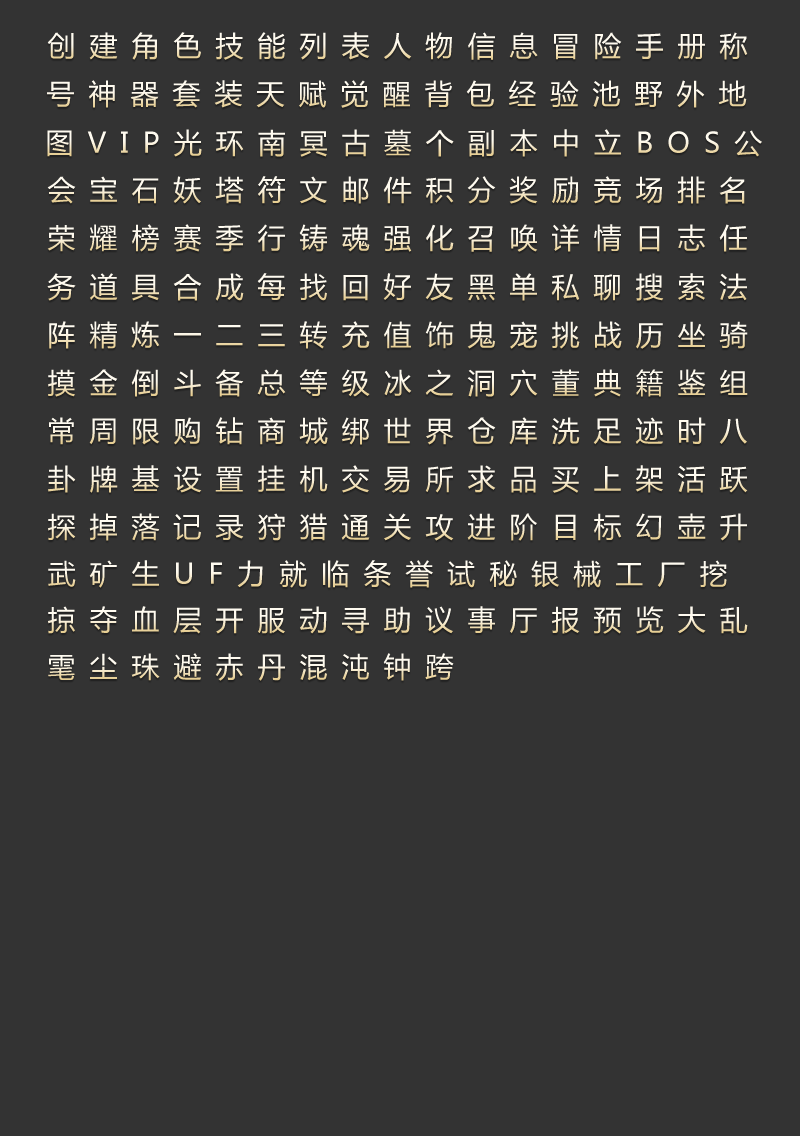
<style>
.page{position:relative;width:800px;height:1136px;background:#333333}
.page>*{position:absolute;margin:0}
.t1{font:28px "MicrosoftYaHei";letter-spacing:0.5em}
</style>
<div class="page">
<p class="t1" style="left:47px;top:32px;width:701px;height:28px">创建角色技能列表人物信息冒险手册称</p>
<p class="t1" style="left:47px;top:80px;width:700px;height:28px">号神器套装天赋觉醒背包经验池野外地</p>
<p class="t1" style="left:47px;top:129px;width:715px;height:28px">图VIP光环南冥古墓个副本中立BOS公</p>
<p class="t1" style="left:47px;top:176px;width:698px;height:28px">会宝石妖塔符文邮件积分奖励竞场排名</p>
<p class="t1" style="left:47px;top:224px;width:700px;height:28px">荣耀榜赛季行铸魂强化召唤详情日志任</p>
<p class="t1" style="left:47px;top:273px;width:700px;height:28px">务道具合成每找回好友黑单私聊搜索法</p>
<p class="t1" style="left:49px;top:321px;width:699px;height:28px">阵精炼一二三转充值饰鬼宠挑战历坐骑</p>
<p class="t1" style="left:48px;top:369px;width:700px;height:28px">摸金倒斗备总等级冰之洞穴董典籍鉴组</p>
<p class="t1" style="left:49px;top:417px;width:698px;height:28px">常周限购钻商城绑世界仓库洗足迹时八</p>
<p class="t1" style="left:48px;top:465px;width:700px;height:28px">卦牌基设置挂机交易所求品买上架活跃</p>
<p class="t1" style="left:48px;top:513px;width:699px;height:28px">探掉落记录狩猎通关攻进阶目标幻壶升</p>
<p class="t1" style="left:48px;top:560px;width:679px;height:28px">武矿生UF力就临条誉试秘银械工厂挖</p>
<p class="t1" style="left:48px;top:606px;width:700px;height:28px">掠夺血层开服动寻助议事厅报预览大乱</p>
<p class="t1" style="left:48px;top:653px;width:406px;height:28px">雮尘珠避赤丹混沌钟跨</p>
</div>
